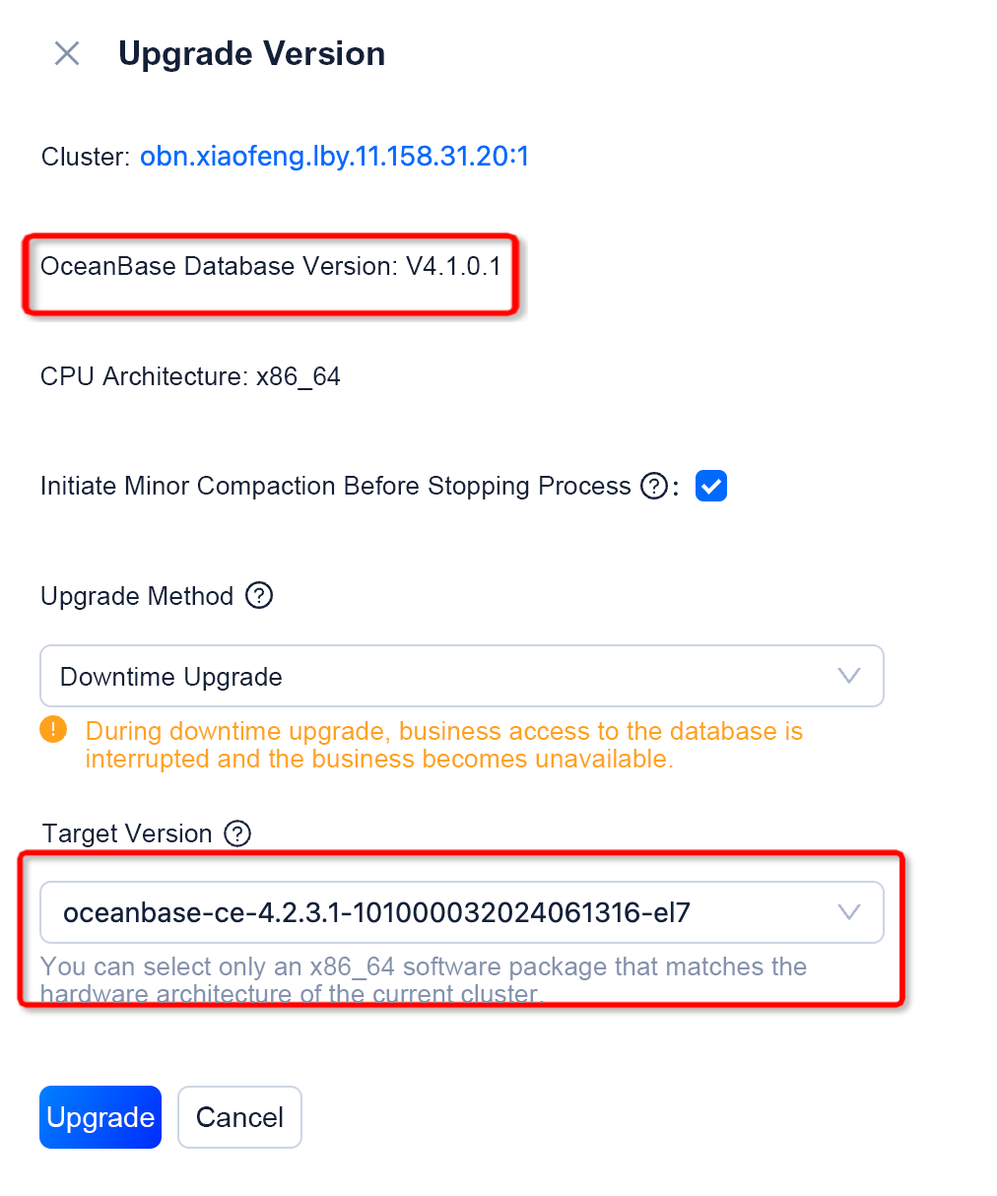
<style>
.page{position:relative;width:997px;height:1196px;background:#ffffff}
.page>*{position:absolute;margin:0}
.t1{font:33.6px "Arial-BoldMT";color:#132039}
.t2{font:26.1px "ArialMT";color:#132039}
.t3{font:26.1px/27.6px "ArialMT";color:#ffa21b}
.t4{font:26.1px/27.6px "ArialMT";color:#8592ad}
.t5{font:28.5px "ArialMT";color:#fdfdff}
.t6{font:28.5px "ArialMT";color:#132039}
</style>
<div class="page">
<p class="t1" style="left:120px;top:40px;width:264px;height:32px">Upgrade Version</p>
<p class="t2" style="left:41px;top:147px;width:88px;height:19px">Cluster:</p>
<p class="t2" style="left:40px;top:256px;width:459px;height:19px">OceanBase Database Version: V4.1.0.1</p>
<p class="t2" style="left:40px;top:366px;width:300px;height:24px">CPU Architecture: x86_64</p>
<p class="t2" style="left:41px;top:476px;width:591px;height:23px">Initiate Minor Compaction Before Stopping Process</p>
<p class="t2" style="left:41px;top:586px;width:192px;height:24px">Upgrade Method</p>
<p class="t2" style="left:61px;top:667px;width:221px;height:24px">Downtime Upgrade</p>
<p class="t3" style="left:87px;top:721px;width:716px;height:51px">During downtime upgrade, business access to the database is interrupted and the business becomes unavailable.</p>
<p class="t2" style="left:42px;top:824px;width:170px;height:23px">Target Version</p>
<p class="t4" style="left:39px;top:957px;width:768px;height:46px">You can select only an x86_64 software package that matches the hardware architecture of the current cluster.</p>
<p class="t5" style="left:47px;top:1106px;width:108px;height:27px">Upgrade</p>
<p class="t6" style="left:196px;top:1106px;width:87px;height:21px">Cancel</p>
</div>
